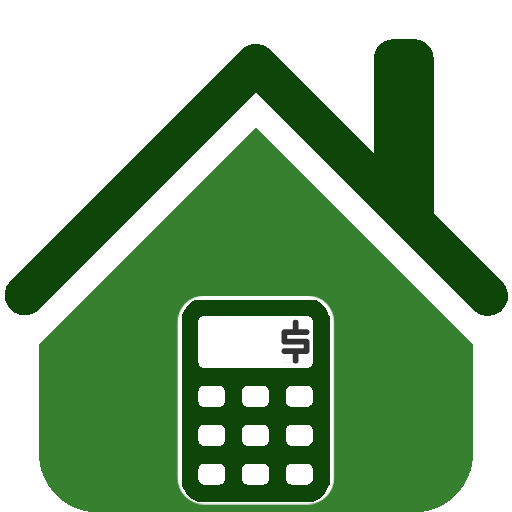
<style>
.page{position:relative;width:512px;height:512px;background:#ffffff}
.page>*{position:absolute;margin:0}
.t1{font:56.4px "OCRAStd";color:#333333}
</style>
<div class="page">
<p class="t1" style="left:281px;top:319px;width:29px;height:45px">$</p>
</div>
